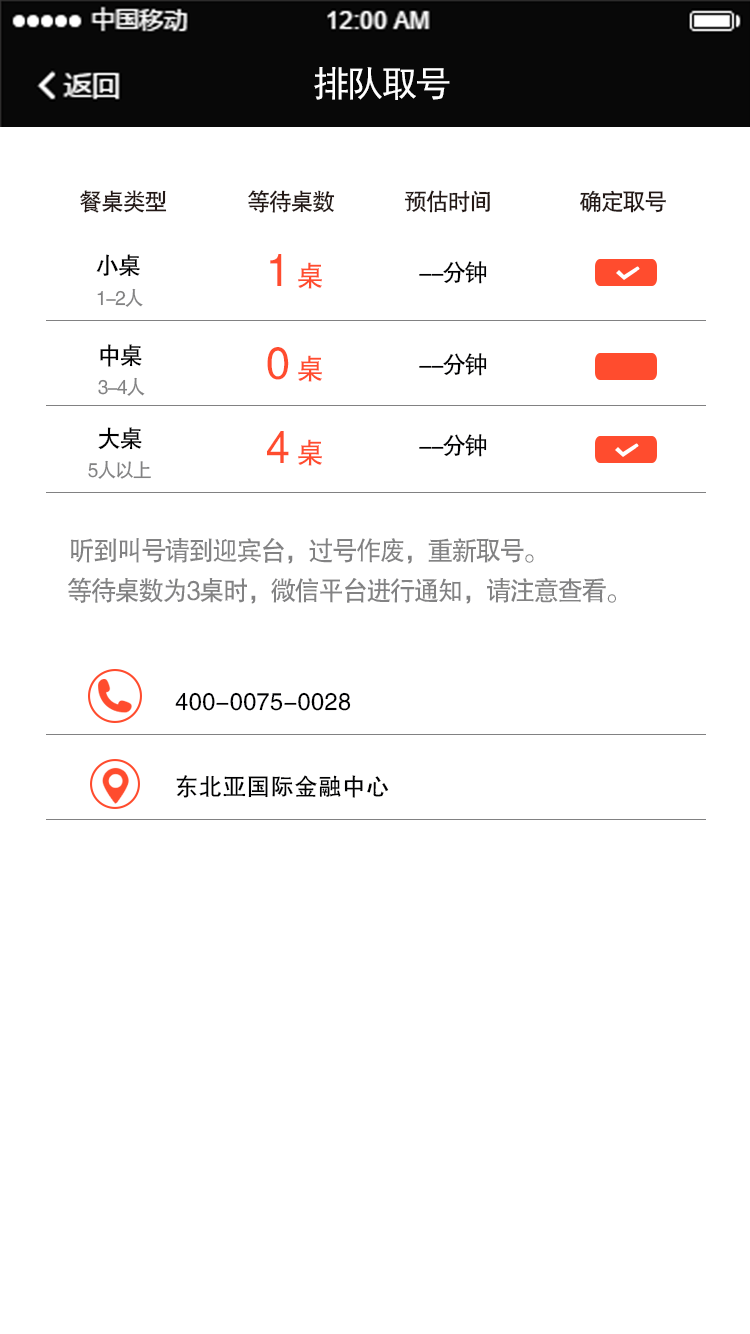
<style>
.page{position:relative;width:750px;height:1334px;background:#ffffff}
.page>*{position:absolute;margin:0}
.t1{font:36px "SimHei";letter-spacing:-0.06em;color:#ffffff}
.t2{font:24px "FZHTK--GBK1-0";letter-spacing:-0.06em;color:#231815;scale:0.96 1}
.t3{font:24.3px "FZHTK--GBK1-0";letter-spacing:-0.06em;color:#000001;scale:0.96 1}
.t4{font:45.4px "FZHTK--GBK1-0";letter-spacing:-0.06em;color:#ff4c2e;scale:0.94 1}
.t5{font:29.1px "FZHTK--GBK1-0";letter-spacing:-0.06em;color:#ff4c2e;scale:0.94 1}
.t6{font:20px "FZHTK--GBK1-0";letter-spacing:-0.06em;color:#818182;scale:0.94 1}
.t7{font:27.2px "FZHTK--GBK1-0";letter-spacing:-0.06em;color:#818182;scale:0.93 1}
.t8{font:24.3px "FZHTK--GBK1-0";letter-spacing:0.02em;color:#000001;scale:0.96 1}
</style>
<div class="page">
<p class="t1" style="left:314px;top:67px;width:136px;height:33px">排队取号</p>
<p class="t2" style="left:80px;top:190px;width:87px;height:23px">餐桌类型</p>
<p class="t2" style="left:248px;top:190px;width:87px;height:23px">等待桌数</p>
<p class="t2" style="left:404px;top:190px;width:86px;height:23px">预估时间</p>
<p class="t2" style="left:580px;top:190px;width:86px;height:23px">确定取号</p>
<p class="t3" style="left:96px;top:254px;width:44px;height:23px">小桌</p>
<p class="t4" style="left:270px;top:254px;width:52px;height:35px">1 <span class="t5">桌</span></p>
<p class="t3" style="left:419px;top:261px;width:68px;height:23px">--分钟</p>
<p class="t6" style="left:97px;top:288px;width:46px;height:19px">1-2人</p>
<p class="t3" style="left:100px;top:344px;width:42px;height:23px">中桌</p>
<p class="t4" style="left:267px;top:347px;width:55px;height:35px">0 <span class="t5">桌</span></p>
<p class="t3" style="left:419px;top:353px;width:68px;height:23px">--分钟</p>
<p class="t6" style="left:98px;top:377px;width:47px;height:19px">3-4人</p>
<p class="t3" style="left:98px;top:427px;width:44px;height:23px">大桌</p>
<p class="t4" style="left:267px;top:431px;width:55px;height:35px">4 <span class="t5">桌</span></p>
<p class="t3" style="left:419px;top:434px;width:68px;height:23px">--分钟</p>
<p class="t6" style="left:88px;top:460px;width:63px;height:19px">5人以上</p>
<p class="t7" style="left:71px;top:537px;width:463px;height:27px">听到叫号请到迎宾台，过号作废，重新取号。</p>
<p class="t7" style="left:68px;top:577px;width:548px;height:27px">等待桌数为3桌时，微信平台进行通知，请注意查看。</p>
<p class="t8" style="left:175px;top:692px;width:176px;height:19px">400-0075-0028</p>
<p class="t8" style="left:176px;top:775px;width:213px;height:23px">东北亚国际金融中心</p>
</div>
